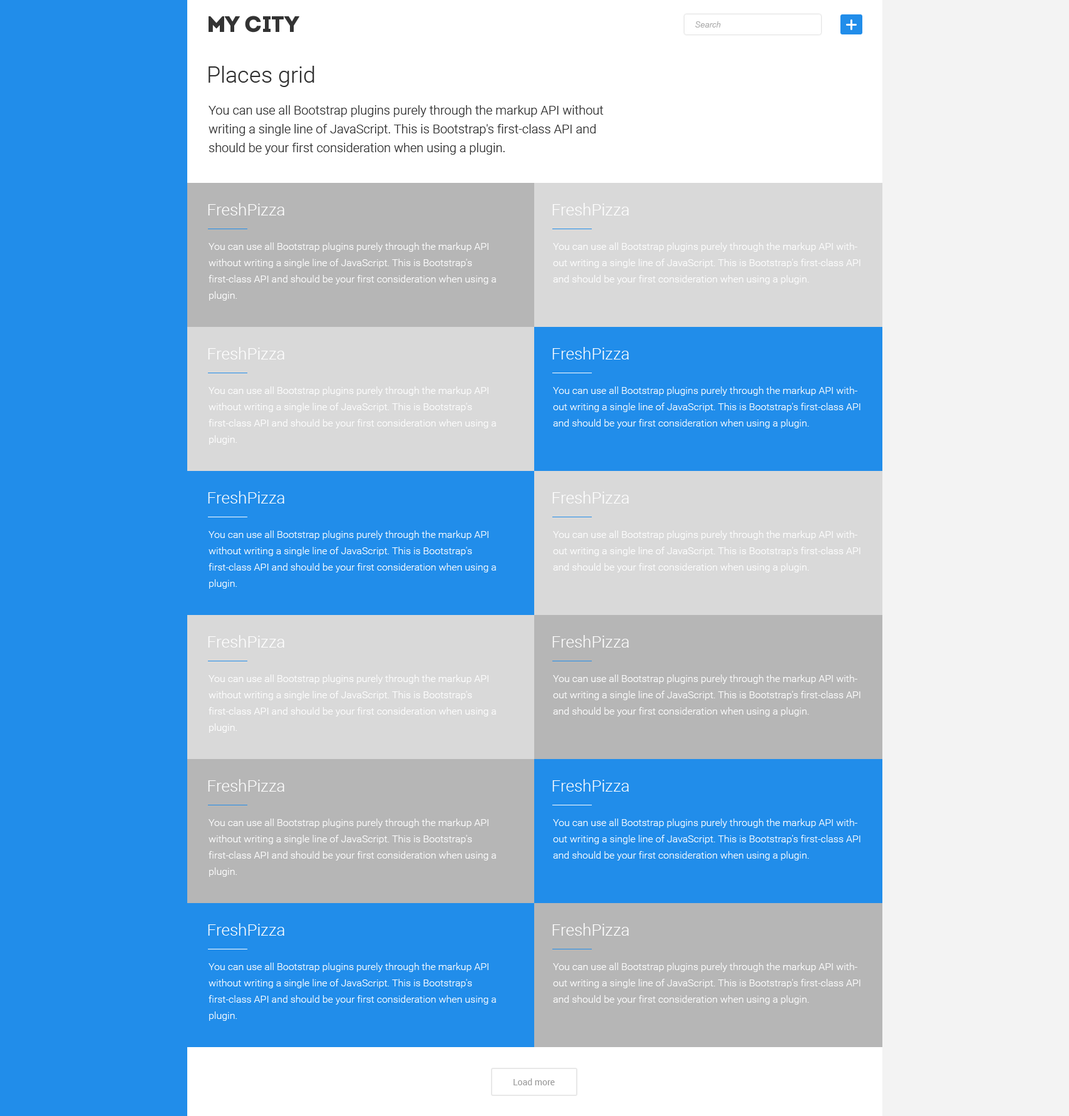
<style>
.page{position:relative;width:1069px;height:1116px;background:#218dea}
.page>*{position:absolute;margin:0}
.t1{font:8.1px "Arial-ItalicMT";color:#acacac}
.t2{font:22.5px "Roboto-Light";color:#2f2f2f}
.t3{font:12.5px/18.8px "Roboto-Light";color:#2f2f2f}
.t4{font:16.3px "Roboto-Light";color:#ffffff}
.t5{font:10px/16.3px "Roboto-Light";color:#ffffff}
.t6{font:8.8px "Roboto-Regular";color:#9b9b9b}
</style>
<div class="page">
<p class="t1" style="left:695px;top:21px;width:26px;height:7px">Search</p>
<p class="t2" style="left:208px;top:66px;width:106px;height:21px">Places grid</p>
<p class="t3" style="left:208px;top:105px;width:396px;height:50px">You can use all Bootstrap plugins purely through the markup API without writing a single line of JavaScript. This is Bootstrap's first-class API and should be your first consideration when using a plugin.</p>
<p class="t4" style="left:208px;top:203px;width:76px;height:12px">FreshPizza</p>
<p class="t4" style="left:552px;top:203px;width:77px;height:12px">FreshPizza</p>
<p class="t5" style="left:208px;top:242px;width:288px;height:59px">You can use all Bootstrap plugins purely through the markup API without writing a single line of JavaScript. This is Bootstrap's first-class API and should be your first consideration when using a plugin.</p>
<p class="t5" style="left:553px;top:242px;width:307px;height:42px">You can use all Bootstrap plugins purely through the markup API without writing a single line of JavaScript. This is Bootstrap's first-class API and should be your first consideration when using a plugin.</p>
<p class="t4" style="left:208px;top:347px;width:76px;height:12px">FreshPizza</p>
<p class="t4" style="left:552px;top:347px;width:77px;height:12px">FreshPizza</p>
<p class="t5" style="left:208px;top:386px;width:288px;height:59px">You can use all Bootstrap plugins purely through the markup API without writing a single line of JavaScript. This is Bootstrap's first-class API and should be your first consideration when using a plugin.</p>
<p class="t5" style="left:553px;top:386px;width:307px;height:42px">You can use all Bootstrap plugins purely through the markup API without writing a single line of JavaScript. This is Bootstrap's first-class API and should be your first consideration when using a plugin.</p>
<p class="t4" style="left:208px;top:491px;width:76px;height:12px">FreshPizza</p>
<p class="t4" style="left:552px;top:491px;width:77px;height:12px">FreshPizza</p>
<p class="t5" style="left:208px;top:530px;width:288px;height:59px">You can use all Bootstrap plugins purely through the markup API without writing a single line of JavaScript. This is Bootstrap's first-class API and should be your first consideration when using a plugin.</p>
<p class="t5" style="left:553px;top:530px;width:307px;height:42px">You can use all Bootstrap plugins purely through the markup API without writing a single line of JavaScript. This is Bootstrap's first-class API and should be your first consideration when using a plugin.</p>
<p class="t4" style="left:208px;top:635px;width:76px;height:12px">FreshPizza</p>
<p class="t4" style="left:552px;top:635px;width:77px;height:12px">FreshPizza</p>
<p class="t5" style="left:208px;top:674px;width:288px;height:59px">You can use all Bootstrap plugins purely through the markup API without writing a single line of JavaScript. This is Bootstrap's first-class API and should be your first consideration when using a plugin.</p>
<p class="t5" style="left:553px;top:674px;width:307px;height:42px">You can use all Bootstrap plugins purely through the markup API without writing a single line of JavaScript. This is Bootstrap's first-class API and should be your first consideration when using a plugin.</p>
<p class="t4" style="left:208px;top:779px;width:76px;height:12px">FreshPizza</p>
<p class="t4" style="left:552px;top:779px;width:77px;height:12px">FreshPizza</p>
<p class="t5" style="left:208px;top:818px;width:288px;height:59px">You can use all Bootstrap plugins purely through the markup API without writing a single line of JavaScript. This is Bootstrap's first-class API and should be your first consideration when using a plugin.</p>
<p class="t5" style="left:553px;top:818px;width:307px;height:42px">You can use all Bootstrap plugins purely through the markup API without writing a single line of JavaScript. This is Bootstrap's first-class API and should be your first consideration when using a plugin.</p>
<p class="t4" style="left:208px;top:923px;width:76px;height:12px">FreshPizza</p>
<p class="t4" style="left:552px;top:923px;width:77px;height:12px">FreshPizza</p>
<p class="t5" style="left:208px;top:962px;width:288px;height:59px">You can use all Bootstrap plugins purely through the markup API without writing a single line of JavaScript. This is Bootstrap's first-class API and should be your first consideration when using a plugin.</p>
<p class="t5" style="left:553px;top:962px;width:307px;height:42px">You can use all Bootstrap plugins purely through the markup API without writing a single line of JavaScript. This is Bootstrap's first-class API and should be your first consideration when using a plugin.</p>
<p class="t6" style="left:513px;top:1078px;width:42px;height:7px">Load more</p>
</div>
